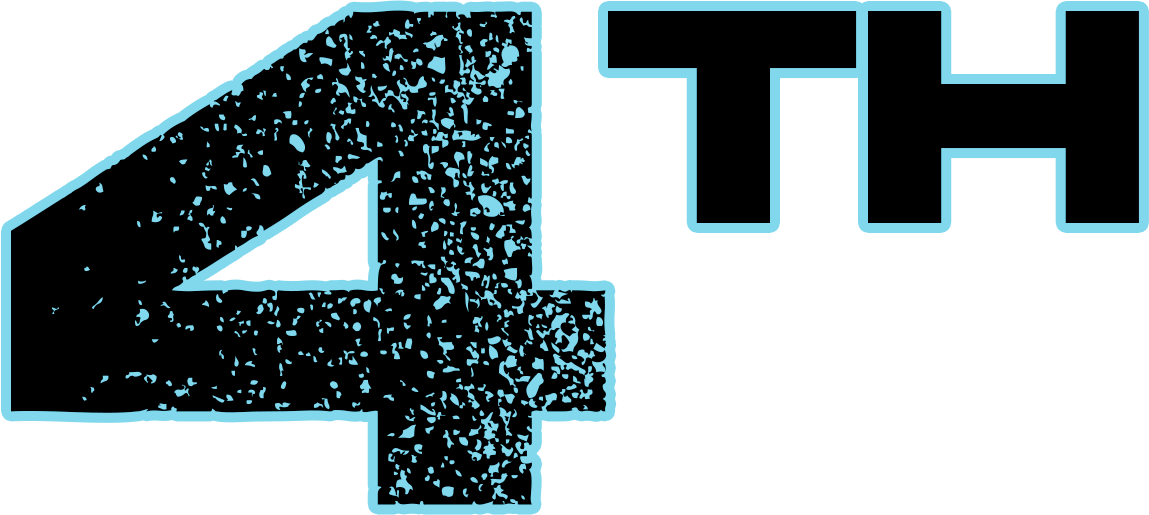
<style>
.page{position:relative;width:1149px;height:515px;background:#ffffff}
.page>*{position:absolute;margin:0}
.t1{font:700px "Coalition";color:#000000}
.t2{font:300px "Coalition";color:#000000}
</style>
<div class="page">
<p class="t1" style="left:11px;top:10px;width:596px;height:495px">4</p>
<p class="t2" style="left:608px;top:11px;width:531px;height:212px">th</p>
</div>
